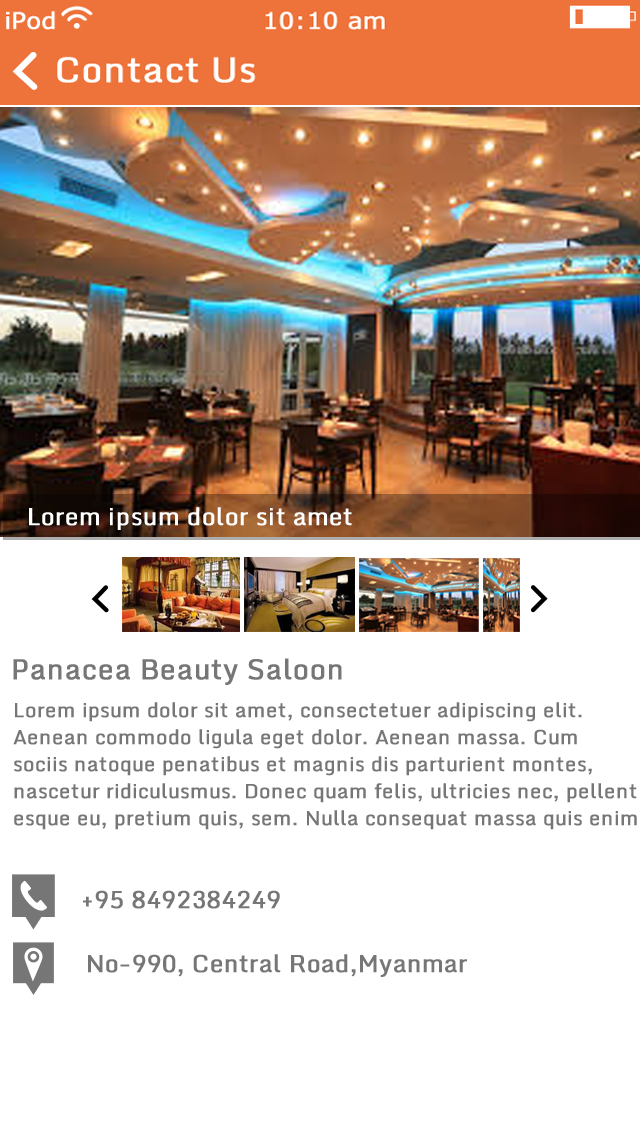
<style>
.page{position:relative;width:640px;height:1136px;background:#ffffff}
.page>*{position:absolute;margin:0}
.t1{font:24px "Monda-Regular";color:#ffffff;font-weight:bold}
.t2{font:28px "Monda-Regular";color:#767676;font-weight:bold}
.t3{font:20px/9px "Monda-Regular";color:#767676;font-weight:bold}
.t4{font:24px "Monda-Regular";color:#767676;font-weight:bold}
</style>
<div class="page">
<p class="t1" style="left:29px;top:507px;width:323px;height:23px">Lorem ipsum dolor sit amet</p>
<p class="t2" style="left:13px;top:658px;width:329px;height:27px">Panacea Beauty Saloon</p>
<p class="t3" style="left:13px;top:702px;width:624px;height:128px">Lorem ipsum dolor sit amet, consectetuer adipiscing elit. <br><br><br>Aenean commodo ligula eget dolor. Aenean massa. Cum <br><br><br>sociis natoque penatibus et magnis dis parturient montes, <br><br><br>nascetur ridiculusmus. Donec quam felis, ultricies nec, pellent<br><br><br>esque eu, pretium quis, sem. Nulla consequat massa quis enim</p>
<p class="t4" style="left:83px;top:890px;width:197px;height:19px">+95 8492384249</p>
<p class="t4" style="left:88px;top:954px;width:379px;height:23px">No-990, Central Road,Myanmar</p>
</div>
